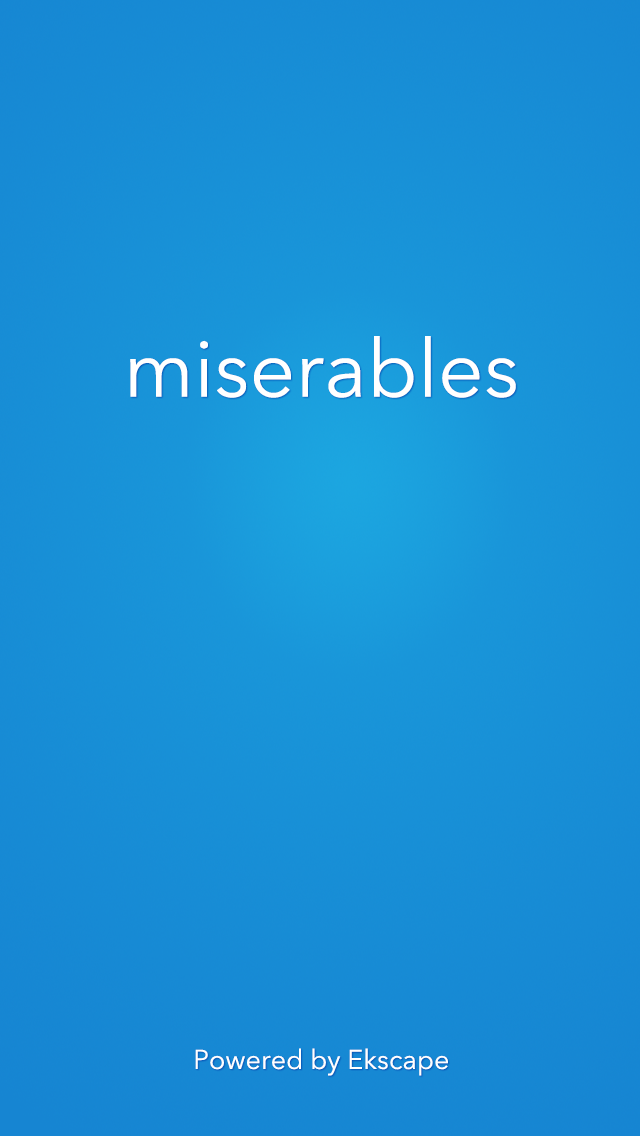
<style>
.page{position:relative;width:640px;height:1136px}
.page>*{position:absolute;margin:0}
.t1{font:80px "AvenirNext-Regular";color:#ffffff}
.t2{font:27px "AvenirNext-Regular";color:#ffffff}
</style>
<div class="page">
<p class="t1" style="left:130px;top:336px;width:386px;height:62px">miserables</p>
<p class="t2" style="left:195px;top:1048px;width:253px;height:28px">Powered by Ekscape</p>
</div>
